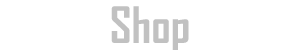
<style>
.page{position:relative;width:300px;height:50px;background:#ffffff}
.page>*{position:absolute;margin:0}
.t1{font:48px "AgencyFB-Bold";color:#c1c1c1}
</style>
<div class="page">
<p class="t1" style="left:111px;top:6px;width:78px;height:46px">Shop</p>
</div>
